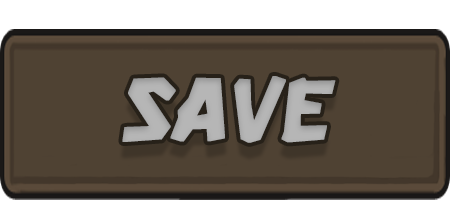
<style>
.page{position:relative;width:450px;height:200px;background:#4f4233}
.page>*{position:absolute;margin:0}
.t1{font:91.7px "Boulder";letter-spacing:-0.025em;color:#b6b6b6;font-weight:bold;font-style:italic}
</style>
<div class="page">
<p class="t1" style="left:122px;top:76px;width:214px;height:67px">save</p>
</div>
